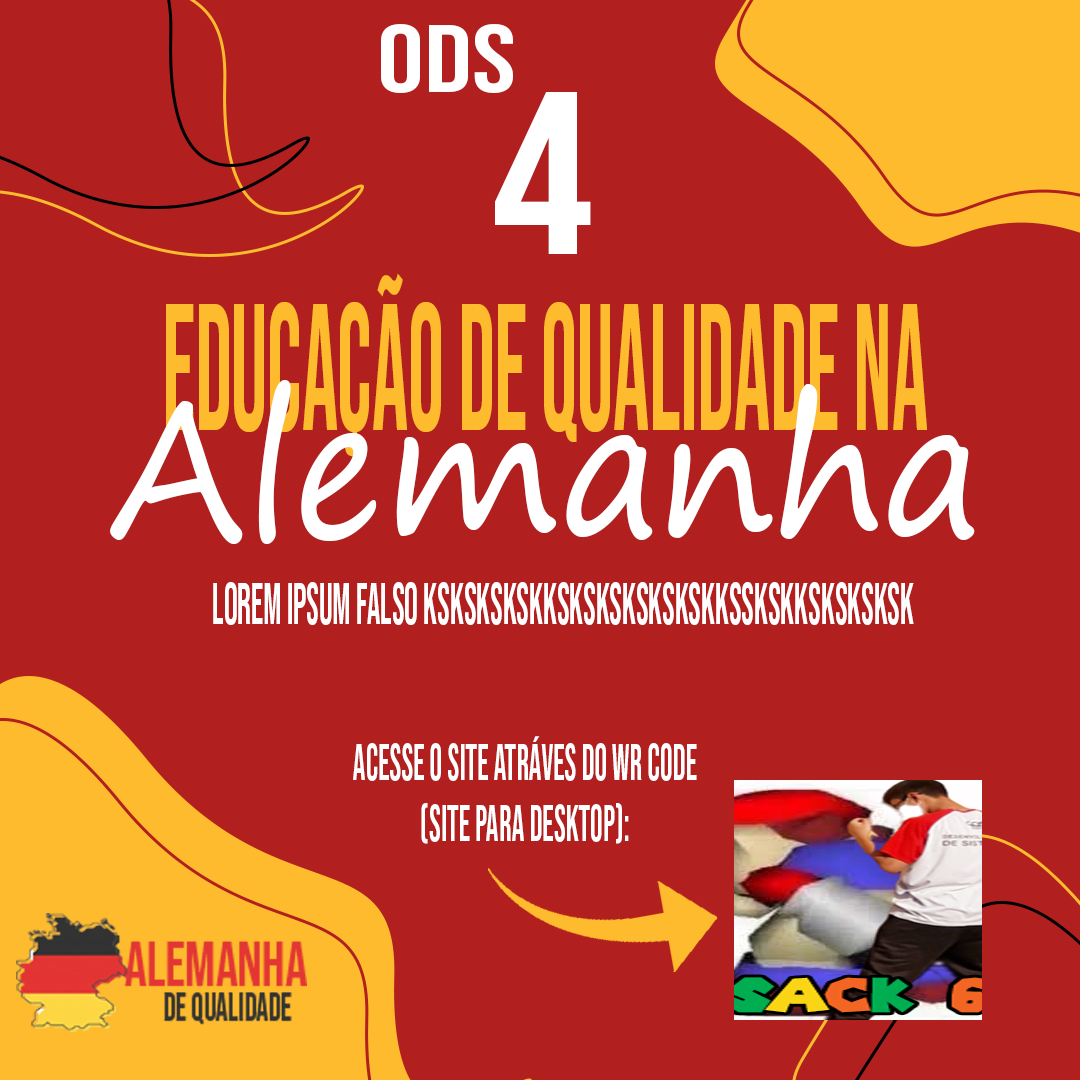
<style>
.page{position:relative;width:1080px;height:1080px;background:#b21f1f}
.page>*{position:absolute;margin:0}
.t1{font:96.2px "BebasNeue-Regular";color:#ffffff;scale:1.22 1}
.t2{font:231.5px "BebasNeue-Regular";color:#ffffff;scale:1.11 1}
.t3{font:180.1px "BebasNeue-Regular";color:#fdbb2d;scale:0.5 1}
.t4{font:188.8px "SegoePrint";color:#ffffff;scale:0.91 1}
.t5{font:59px "BebasNeue-Regular";color:#ffffff;scale:0.57 1}
.t6{font:50.8px "BebasNeue-Regular";color:#ffffff;scale:0.62 1}
</style>
<div class="page">
<p class="t1" style="left:381px;top:24px;width:132px;height:69px">ODS</p>
<p class="t2" style="left:495px;top:92px;width:96px;height:162px">4</p>
<p class="t3" style="left:166px;top:273px;width:761px;height:184px">Educação de Qualidade na</p>
<p class="t4" style="left:110px;top:379px;width:865px;height:165px">Alemanha</p>
<p class="t5" style="left:213px;top:582px;width:701px;height:43px">lorem ipsum falso kskskskskkskskskskskskksskskksksksksk</p>
<p class="t6" style="left:353px;top:736px;width:344px;height:108px;text-align:center">Acesse o site atráves do WR code (site para Desktop):</p>
</div>
